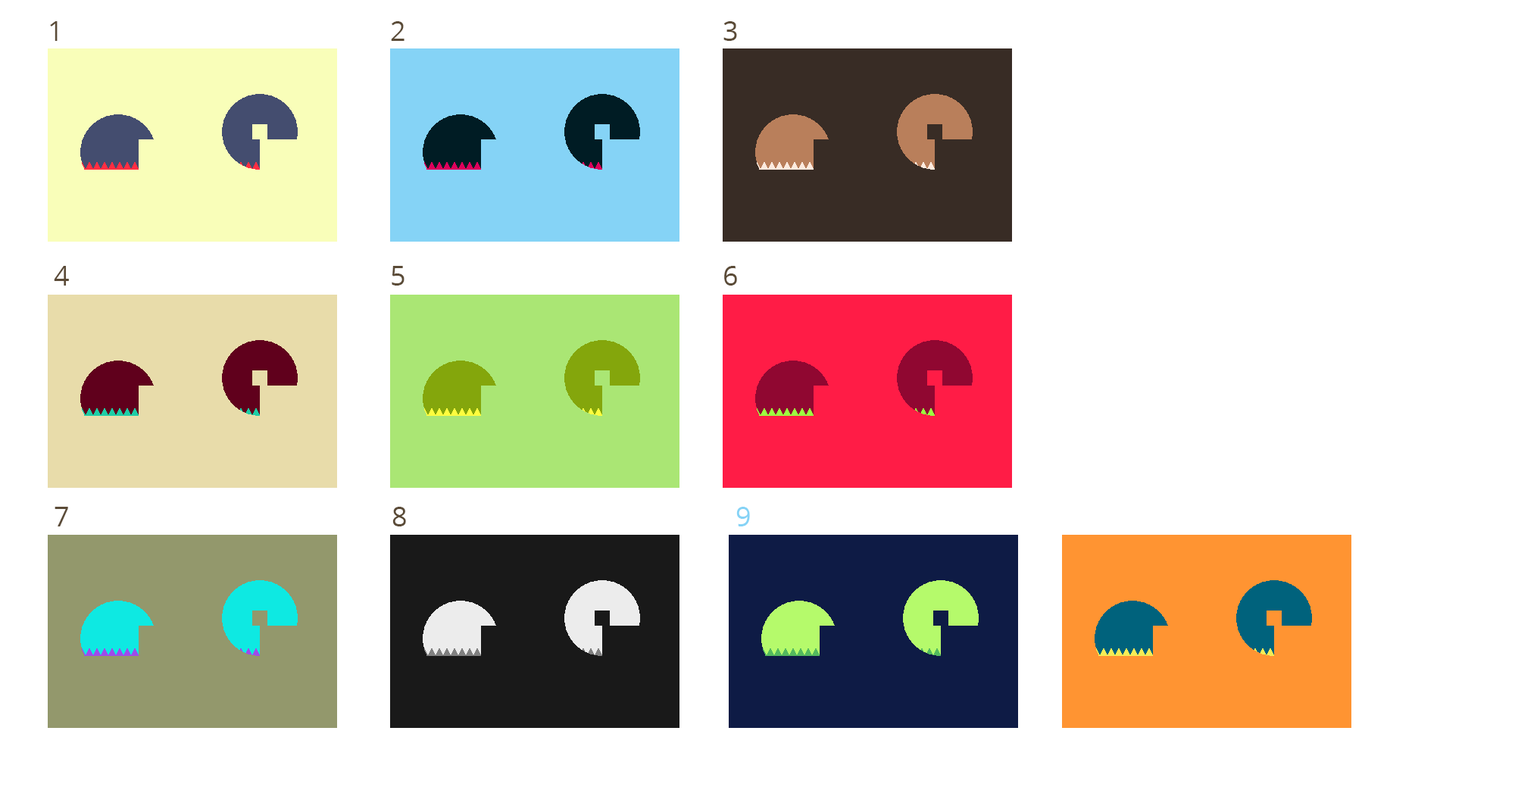
<style>
.page{position:relative;width:1515px;height:787px;background:#ffffff}
.page>*{position:absolute;margin:0}
.t1{font:27.3px "OpenSans";color:#5b4b37}
.t2{font:27.3px "OpenSans";color:#85d3f6}
</style>
<div class="page">
<p class="t1" style="left:50px;top:21px;width:8px;height:20px">1</p>
<p class="t1" style="left:391px;top:21px;width:14px;height:20px">2</p>
<p class="t1" style="left:723px;top:21px;width:14px;height:20px">3</p>
<p class="t1" style="left:54px;top:266px;width:15px;height:20px">4</p>
<p class="t1" style="left:392px;top:266px;width:13px;height:20px">5</p>
<p class="t1" style="left:724px;top:266px;width:13px;height:20px">6</p>
<p class="t1" style="left:55px;top:507px;width:13px;height:19px">7</p>
<p class="t1" style="left:392px;top:507px;width:14px;height:19px">8</p>
<p class="t2" style="left:736px;top:507px;width:14px;height:19px">9</p>
</div>
